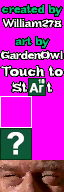
<style>
.page{position:relative;width:64px;height:192px;background:#ff00ff}
.page>*{position:absolute;margin:0}
.t1{font:11px/14px "Bundy-Regular";color:#00c57b;font-weight:bold;scale:1.05 1}
.t2{font:11px/14px "Bundy-Regular";letter-spacing:-0.025em;color:#ffffff;font-weight:bold;scale:1.05 1}
.t3{font:13.6px/16px "Bundy-Regular";color:#ffffff;font-weight:bold;scale:1.05 1}
.t4{font:12px "Arial-BoldMT";color:#ffffff;font-weight:bold}
.t5{font:5px "ArialMT";letter-spacing:0.02em;color:#ffffff;font-weight:bold}
.t6{font:30px "Arial-BoldMT";color:#ffffff;font-weight:bold}
</style>
<div class="page">
<p class="t1" style="left:2px;top:4px;width:61px;height:24px;text-align:center">created by<br><span class="t2">William278</span></p>
<p class="t2" style="left:1px;top:36px;width:62px;height:24px;text-align:center"><span class="t1">art by<br></span>GardenOwl</p>
<p class="t3" style="left:1px;top:65px;width:62px;height:28px;text-align:center">Touch to<br>St     t</p>
<p class="t4" style="left:29px;top:83px;width:15px;height:10px">Ar</p>
<p class="t5" style="left:38px;top:79px;width:7px;height:5px">18</p>
<p class="t6" style="left:7px;top:132px;width:17px;height:23px">?</p>
</div>
